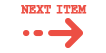
<style>
.page{position:relative;width:106px;height:53px;background:#ffffff}
.page>*{position:absolute;margin:0}
.t1{font:12px "CourierNewPS-BoldMT";color:#ec4f44;font-weight:bold}
</style>
<div class="page">
<p class="t1" style="left:21px;top:5px;width:66px;height:9px">NEXT ITEM</p>
</div>
